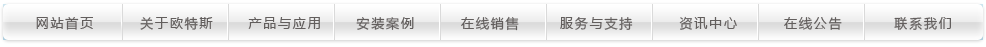
<style>
.page{position:relative;width:986px;height:47px}
.page>*{position:absolute;margin:0}
.t1{font:13px "MicrosoftYaHei";letter-spacing:0.14em;color:#625e5d}
</style>
<div class="page">
<p class="t1" style="left:36px;top:16px;width:915px;height:15px">网站首页        关于欧特斯      产品与应用      安装案例        在线销售       服务与支持        资讯中心        在线公告         联系我们</p>
</div>
